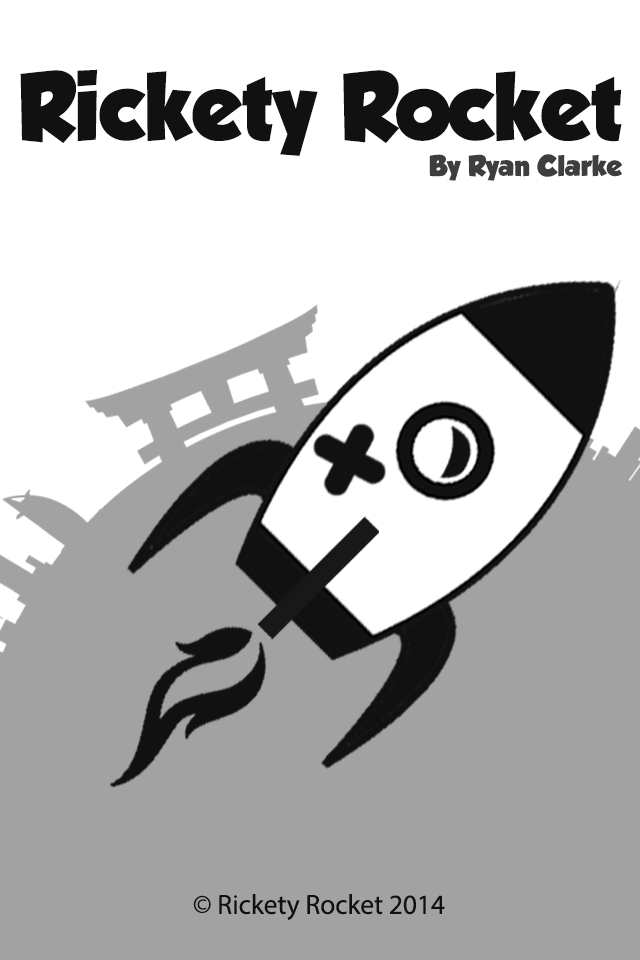
<style>
.page{position:relative;width:640px;height:960px;background:#ffffff}
.page>*{position:absolute;margin:0}
.t1{font:84.7px "GROBOLD";color:#111111}
.t2{font:25.6px "GROBOLD";color:#3e3e3e}
.t3{font:27.6px "MyriadPro-Regular";color:#111111}
</style>
<div class="page">
<p class="t1" style="left:20px;top:69px;width:602px;height:87px">Rickety Rocket</p>
<p class="t2" style="left:429px;top:154px;width:194px;height:27px">By Ryan Clarke</p>
<p class="t3" style="left:193px;top:894px;width:252px;height:26px">© Rickety Rocket 2014</p>
</div>
